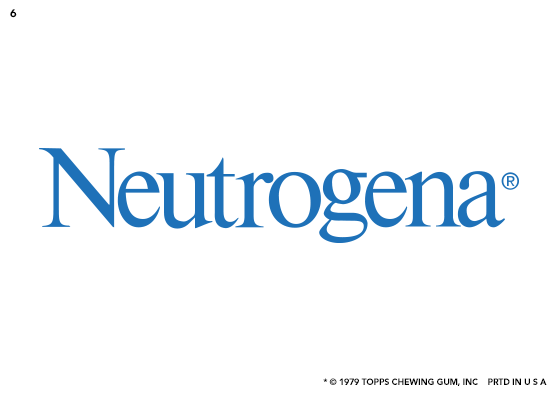
<style>
.page{position:relative;width:554px;height:394px;background:#ffffff}
.page>*{position:absolute;margin:0}
.t1{font:11.1px "Avenir-Black";letter-spacing:-0.025em;color:#000000}
.t2{font:8.9px "Avenir-Black";letter-spacing:-0.025em;color:#000000}
</style>
<div class="page">
<p class="t1" style="left:10px;top:9px;width:7px;height:9px">6</p>
<p class="t2" style="left:323px;top:378px;width:224px;height:8px">* © 1979 TOPPS CHEWING GUM, INC    PRTD IN U S A</p>
</div>
